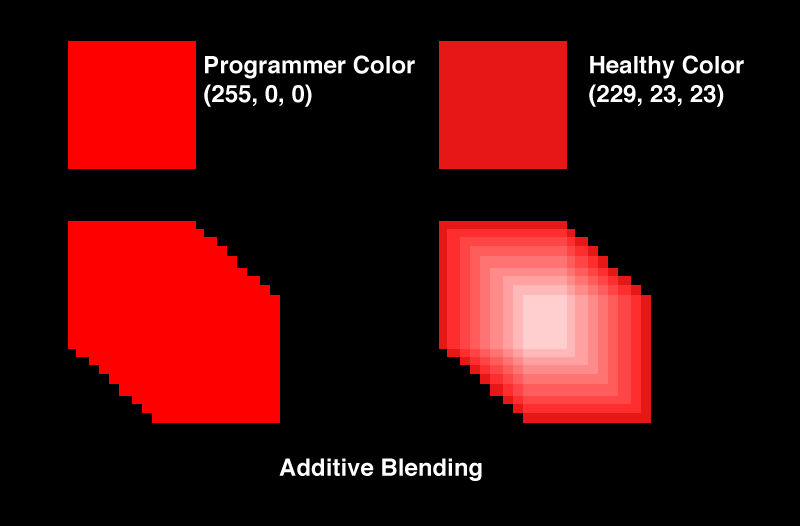
<style>
.page{position:relative;width:800px;height:526px;background:#000000}
.page>*{position:absolute;margin:0}
.t1{font:24px "Helvetica-Bold";color:#ffffff}
</style>
<div class="page">
<p class="t1" style="left:204px;top:55px;width:211px;height:52px">Programmer Color<br>(255, 0, 0)</p>
<p class="t1" style="left:589px;top:55px;width:155px;height:52px">Healthy Color<br>(229, 23, 23)</p>
<p class="t1" style="left:279px;top:458px;width:203px;height:23px">Additive Blending</p>
</div>
